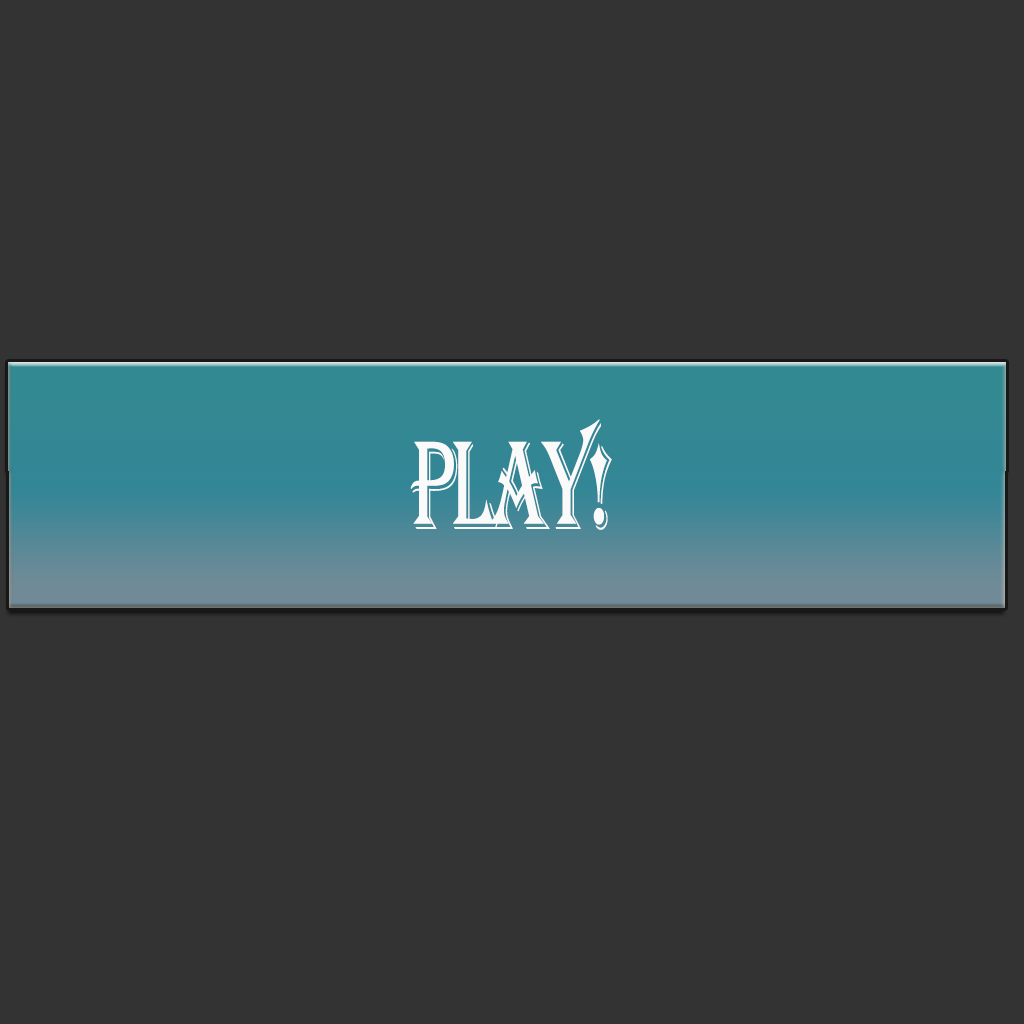
<style>
.page{position:relative;width:1024px;height:1024px;background:#333333}
.page>*{position:absolute;margin:0}
.t1{font:130.4px "Algerian";letter-spacing:-0.08em;color:#fafafa;scale:0.61 1}
</style>
<div class="page">
<p class="t1" style="left:410px;top:419px;width:202px;height:111px">PLAY!</p>
</div>
